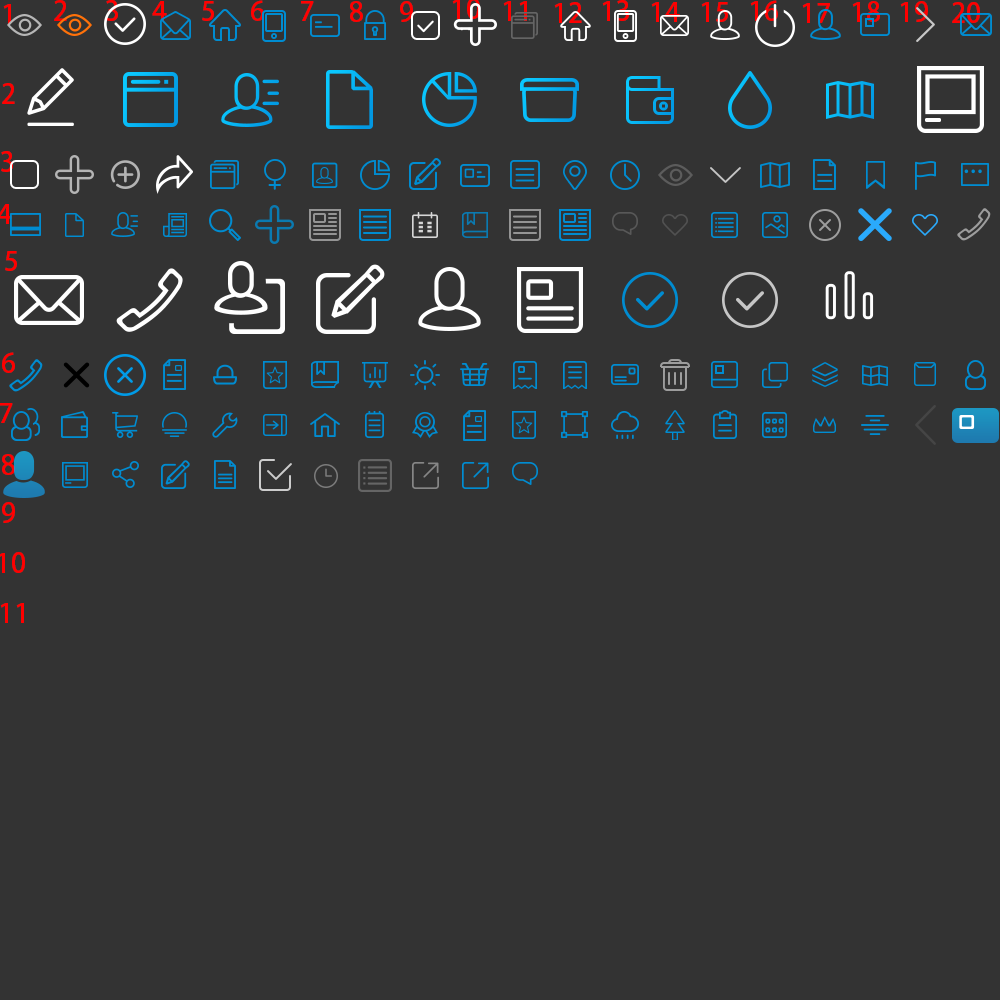
<style>
.page{position:relative;width:1000px;height:1000px;background:#333333}
.page>*{position:absolute;margin:0}
.t1{font:26.9px "AdobeHeitiStd-Regular";letter-spacing:0.01em;color:#ff0000}
</style>
<div class="page">
<p class="t1" style="left:3px;top:4px;width:8px;height:20px">1</p>
<p class="t1" style="left:54px;top:0px;width:13px;height:21px">2</p>
<p class="t1" style="left:106px;top:0px;width:12px;height:21px">3</p>
<p class="t1" style="left:152px;top:1px;width:15px;height:20px">4</p>
<p class="t1" style="left:202px;top:1px;width:12px;height:20px">5</p>
<p class="t1" style="left:251px;top:0px;width:13px;height:21px">6</p>
<p class="t1" style="left:301px;top:1px;width:13px;height:20px">7</p>
<p class="t1" style="left:350px;top:1px;width:13px;height:21px">8</p>
<p class="t1" style="left:400px;top:1px;width:13px;height:21px">9</p>
<p class="t1" style="left:452px;top:0px;width:28px;height:19px">10</p>
<p class="t1" style="left:503px;top:1px;width:24px;height:20px">11</p>
<p class="t1" style="left:554px;top:2px;width:28px;height:21px">12</p>
<p class="t1" style="left:602px;top:0px;width:27px;height:21px">13</p>
<p class="t1" style="left:651px;top:2px;width:29px;height:20px">14</p>
<p class="t1" style="left:701px;top:2px;width:27px;height:20px">15</p>
<p class="t1" style="left:750px;top:0px;width:28px;height:21px">16</p>
<p class="t1" style="left:802px;top:3px;width:28px;height:20px">17</p>
<p class="t1" style="left:852px;top:1px;width:28px;height:21px">18</p>
<p class="t1" style="left:900px;top:1px;width:28px;height:21px">19</p>
<p class="t1" style="left:952px;top:2px;width:28px;height:21px">20</p>
<p class="t1" style="left:2px;top:83px;width:13px;height:21px">2</p>
<p class="t1" style="left:1px;top:151px;width:12px;height:21px">3</p>
<p class="t1" style="left:5px;top:251px;width:12px;height:20px">5</p>
<p class="t1" style="left:2px;top:352px;width:13px;height:21px">6</p>
<p class="t1" style="left:0px;top:403px;width:13px;height:20px">7</p>
<p class="t1" style="left:2px;top:454px;width:13px;height:21px">8</p>
<p class="t1" style="left:2px;top:502px;width:13px;height:21px">9</p>
<p class="t1" style="left:0px;top:603px;width:24px;height:20px">11</p>
</div>
